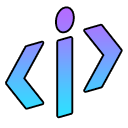
<style>
.page{position:relative;width:128px;height:128px;background:#ffffff}
.page>*{position:absolute;margin:0}
.t1{font:134.7px "Poppins-SemiBold";scale:0.69 1}
</style>
<div class="page">
<p class="t1" style="left:7px;top:8px;width:114px;height:109px;rotate:-16deg">&lt;i&gt;</p>
</div>
